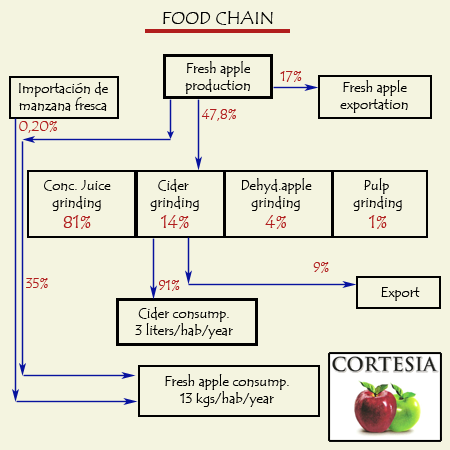
<style>
.page{position:relative;width:450px;height:450px;background:#f4f4e0}
.page>*{position:absolute;margin:0}
.t1{font:18px "TempusSansITC";color:#000000}
.t2{font:14px "TempusSansITC";color:#000000}
.t3{font:14px "TempusSansITC";color:#b11e1e}
.t4{font:18px "TempusSansITC";color:#b11e1e}
</style>
<div class="page">
<p class="t1" style="left:163px;top:11px;width:110px;height:14px">FOOD CHAIN</p>
<p class="t2" style="left:185px;top:61px;width:65px;height:33px;text-align:center">Fresh apple<br>production</p>
<p class="t3" style="left:280px;top:71px;width:22px;height:11px">17%</p>
<p class="t2" style="left:19px;top:82px;width:89px;height:29px;text-align:center">Importación de<br>manzana fresca</p>
<p class="t2" style="left:340px;top:80px;width:68px;height:33px;text-align:center">Fresh apple<br>exportation</p>
<p class="t3" style="left:201px;top:109px;width:35px;height:12px">47,8%</p>
<p class="t3" style="left:19px;top:121px;width:38px;height:12px">0,20%</p>
<p class="t2" style="left:44px;top:180px;width:67px;height:49px;text-align:center">Conc. Juice<br>grinding<br><span class="t4">81%</span></p>
<p class="t2" style="left:150px;top:179px;width:49px;height:50px;text-align:center">Cider <br>grinding<br><span class="t4">14%</span></p>
<p class="t2" style="left:241px;top:178px;width:71px;height:51px;text-align:center">Dehyd.apple<br>grinding<br><span class="t4">4%</span></p>
<p class="t2" style="left:353px;top:178px;width:49px;height:51px;text-align:center">Pulp <br>grinding<br><span class="t4">1%</span></p>
<p class="t3" style="left:313px;top:262px;width:16px;height:11px">9%</p>
<p class="t3" style="left:26px;top:278px;width:22px;height:11px">35%</p>
<p class="t3" style="left:159px;top:280px;width:21px;height:11px">91%</p>
<p class="t2" style="left:381px;top:287px;width:39px;height:14px">Export</p>
<p class="t2" style="left:135px;top:307px;width:98px;height:32px;text-align:center">Cider consump.<br>3 liters/hab/year</p>
<p class="t2" style="left:165px;top:374px;width:124px;height:33px;text-align:center">Fresh apple consump.<br>13 kgs/hab/year</p>
</div>
